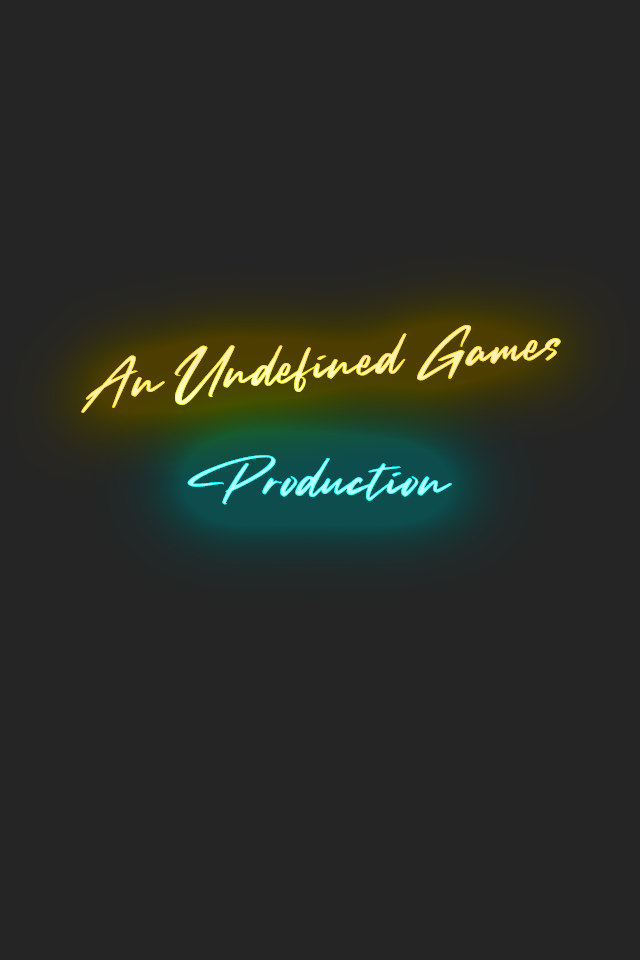
<style>
.page{position:relative;width:640px;height:960px;background:#252525}
.page>*{position:absolute;margin:0}
.t1{font:33.3px "SmoothFantasyPersonalUse"}
</style>
<div class="page">
<p class="t1" style="left:81px;top:325px;width:480px;height:88px;rotate:-5deg">An Undefined Games</p>
<p class="t1" style="left:81px;top:325px;width:480px;height:88px;rotate:-5deg">An Undefined Games</p>
<p class="t1" style="left:187px;top:455px;width:265px;height:50px">Production</p>
<p class="t1" style="left:187px;top:455px;width:265px;height:50px">Production</p>
</div>
